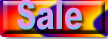
<style>
.page{position:relative;width:108px;height:39px}
.page>*{position:absolute;margin:0}
.t1{font:40px "Arial-Black";scale:0.7 1}
</style>
<div class="page">
<p class="t1" style="left:17px;top:0px;width:65px;height:30px">Sale</p>
</div>
